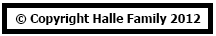
<style>
.page{position:relative;width:216px;height:36px;background:#ffffff}
.page>*{position:absolute;margin:0}
.t1{font:12px "Tahoma-Bold";color:#000000}
</style>
<div class="page">
<p class="t1" style="left:15px;top:13px;width:186px;height:12px">© Copyright Halle Family 2012</p>
</div>
